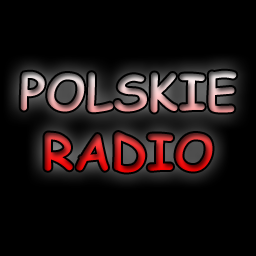
<style>
.page{position:relative;width:256px;height:256px;background:#000000}
.page>*{position:absolute;margin:0}
.t1{font:50px "ComicSansMS-Bold"}
</style>
<div class="page">
<p class="t1" style="left:20px;top:70px;width:217px;height:103px;text-align:center">POLSKIE<br>RADIO</p>
</div>
